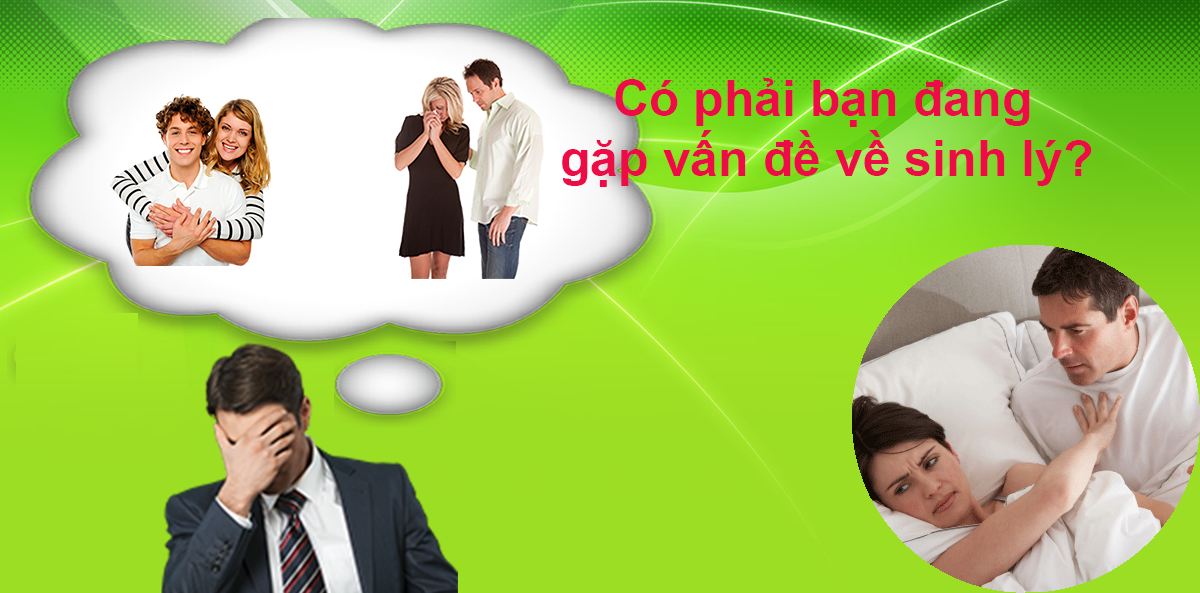
<style>
.page{position:relative;width:1200px;height:593px}
.page>*{position:absolute;margin:0}
.t1{font:50px "Arial-BoldMT";color:#ed0c46}
.t2{font:60px "Arial-BoldMT";color:#000000}
</style>
<div class="page">
<p class="t1" style="left:562px;top:78px;width:530px;height:109px"><span class="t2">    </span>Có phải bạn đang<br> gặp vấn đề về sinh lý?</p>
</div>
